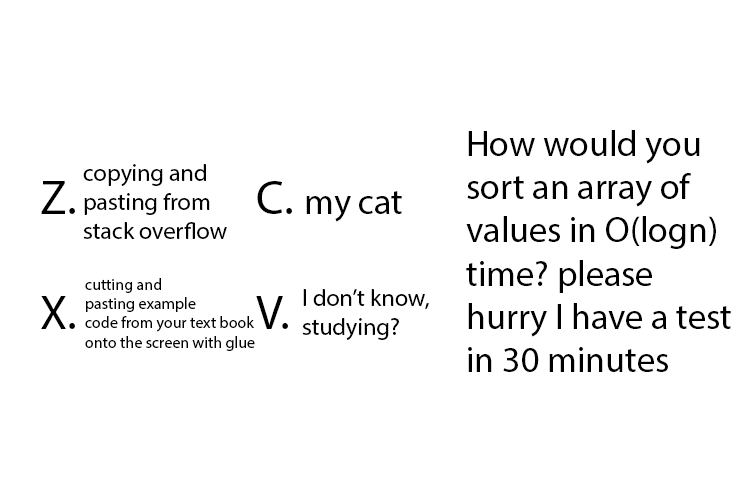
<style>
.page{position:relative;width:754px;height:500px;background:#ffffff}
.page>*{position:absolute;margin:0}
.t1{font:36px "MyriadPro-Regular";color:#000000}
.t2{font:24px "MyriadPro-Regular";color:#000000}
.t3{font:48px "MyriadPro-Regular";color:#000000}
.t4{font:16px "MyriadPro-Regular";color:#000000}
</style>
<div class="page">
<p class="t1" style="left:466px;top:130px;width:265px;height:242px">How would you<br>sort an array of <br>values in O(logn)<br>time? please<br>hurry I have a test <br>in 30 minutes</p>
<p class="t2" style="left:83px;top:164px;width:144px;height:75px">copying and <br>pasting from <br>stack overflow</p>
<p class="t3" style="left:41px;top:181px;width:361px;height:148px">Z.                 C. <span class="t1">my cat<br></span><br>X.     V.</p>
<p class="t4" style="left:85px;top:278px;width:170px;height:73px">cutting and<br>pasting example<br>code from your text book<br>onto the screen with glue</p>
<p class="t2" style="left:302px;top:289px;width:127px;height:51px">I don’t know, <br>studying?</p>
</div>
